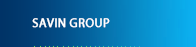
<style>
.page{position:relative;width:196px;height:47px}
.page>*{position:absolute;margin:0}
.t1{font:12.9px "Myriad-Roman";color:#ffffff;text-transform:uppercase;font-weight:bold}
</style>
<div class="page">
<p class="t1" style="left:32px;top:18px;width:78px;height:10px">Savin group</p>
</div>
